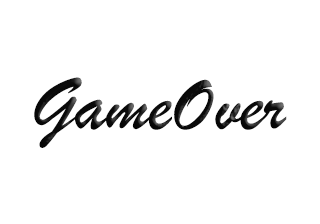
<style>
.page{position:relative;width:320px;height:224px;background:#ffffff}
.page>*{position:absolute;margin:0}
.t1{font:77.1px "BrushScriptMT";color:#0b0b0b}
</style>
<div class="page">
<p class="t1" style="left:34px;top:77px;width:253px;height:71px">GameOver</p>
</div>
